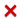
<style>
.page{position:relative;width:21px;height:21px;background:#ffffff}
.page>*{position:absolute;margin:0}
.t1{font:29.5px "AppleSymbols";color:#da0000}
</style>
<div class="page">
<p class="t1" style="left:4px;top:4px;width:13px;height:13px">𐄂</p>
</div>
